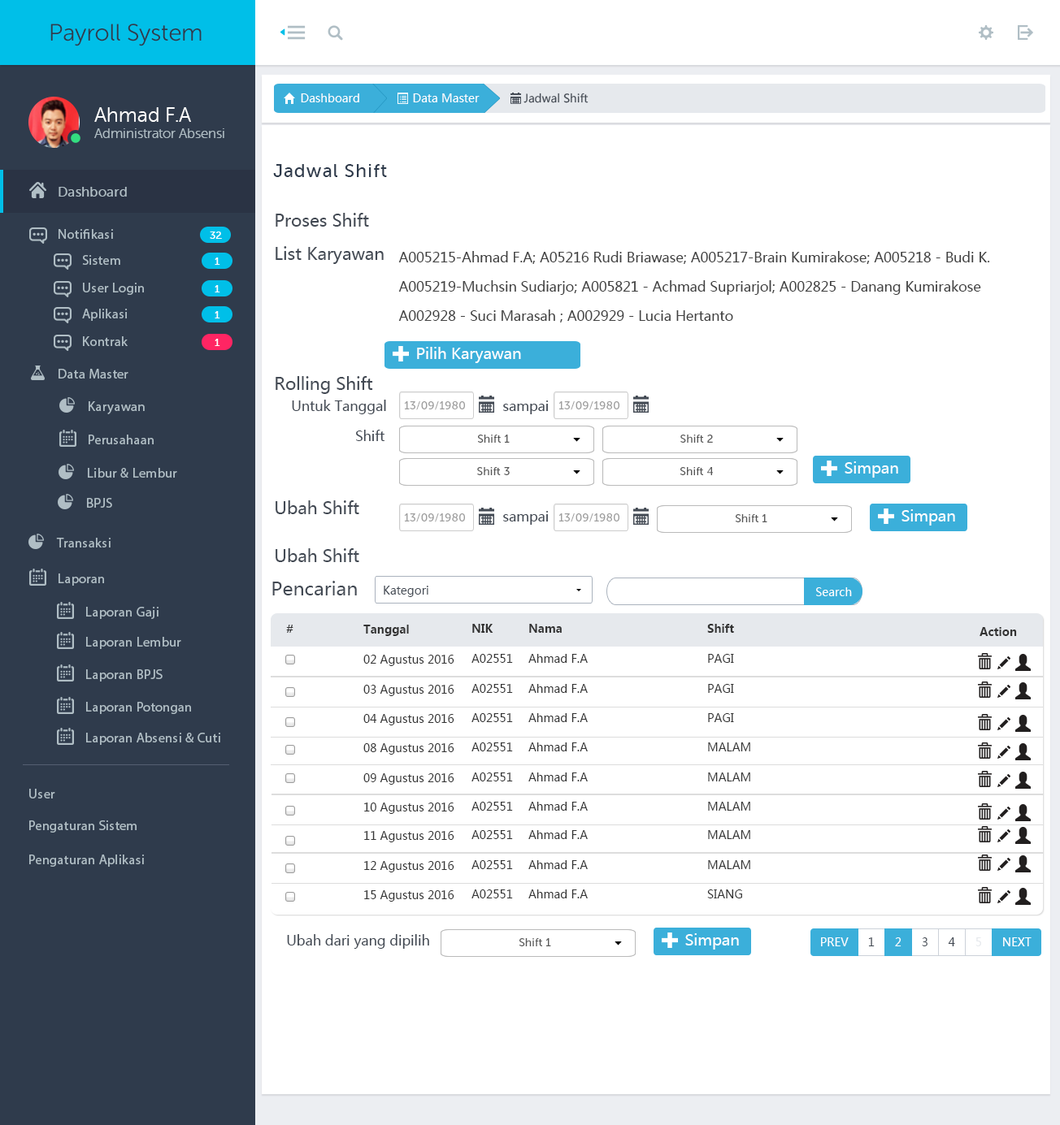
<style>
.page{position:relative;width:1060px;height:1125px;background:#ffffff}
.page>*{position:absolute;margin:0}
.t1{font:23.7px "MuseoSansRounded-300";color:#2f3b4c}
.t2{font:11.4px "MicrosoftYaHei";color:#ffffff}
.t3{font:11.2px "MicrosoftYaHei";color:#434a54}
.t4{font:13.5px "MuseoSansRounded-300";color:#b0bec5}
.t5{font:20.3px "MuseoSansRounded-300";color:#ffffff}
.t6{font:18.6px "MuseoSans-500";letter-spacing:0.04em;color:#2f3b4c}
.t7{font:13.5px "MuseoSans-500";letter-spacing:0.02em;color:#b0bec5}
.t8{font:16.9px "MicrosoftYaHei";color:#434a54}
.t9{font:13.5px "MyriadPro-Regular";letter-spacing:0.02em;color:#b0bec5}
.t10{font:10.2px "MuseoSans-500";letter-spacing:0.02em;color:#ffffff}
.t11{font:13.5px/29.3px "MicrosoftYaHei";color:#414141}
.t12{font:15.2px "MicrosoftYaHei";color:#ffffff}
.t13{font:13.5px "MicrosoftYaHei";color:#434a54}
.t14{font:11.4px "MuseoSans-500";color:#9e9e9e}
.t15{font:11.4px "MuseoSans-500";color:#585858}
.t16{font:18.6px "MicrosoftYaHei";color:#434a54}
.t17{font:11.4px "MicrosoftYaHei";color:#434a54}
.t18{font:11.4px "MicrosoftYaHei-Bold";color:#333333}
.t19{font:11.4px "MicrosoftYaHei";color:#333333}
.t20{font:11.4px "MicrosoftYaHei";color:#e6e9ed}
</style>
<div class="page">
<p class="t1" style="left:50px;top:24px;width:152px;height:22px">Payroll System</p>
<p class="t2" style="left:301px;top:93px;width:58px;height:9px">Dashboard</p>
<p class="t2" style="left:413px;top:93px;width:66px;height:9px">Data Master</p>
<p class="t3" style="left:523px;top:93px;width:65px;height:10px">Jadwal Shift</p>
<p class="t4" style="left:94px;top:107px;width:130px;height:31px"><span class="t5">Ahmad F.A <br></span>Administrator Absensi</p>
<p class="t6" style="left:273px;top:164px;width:114px;height:13px">Jadwal Shift</p>
<p class="t7" style="left:59px;top:187px;width:68px;height:10px">Dashboard</p>
<p class="t8" style="left:275px;top:213px;width:94px;height:14px">Proses Shift</p>
<p class="t9" style="left:59px;top:229px;width:54px;height:10px">Notifikasi</p>
<p class="t10" style="left:210px;top:232px;width:12px;height:7px">32</p>
<p class="t9" style="left:82px;top:255px;width:38px;height:10px">Sistem</p>
<p class="t10" style="left:215px;top:258px;width:5px;height:7px">1</p>
<p class="t8" style="left:275px;top:246px;width:109px;height:18px">List Karyawan</p>
<p class="t11" style="left:398px;top:251px;width:592px;height:72px">A005215-Ahmad F.A; A05216 Rudi Briawase; A005217-Brain Kumirakose; A005218 - Budi K.<br>A005219-Muchsin Sudiarjo; A005821 - Achmad Supriarjol; A002825 - Danang Kumirakose<br>A002928 - Suci Marasah ; A002929 - Lucia Hertanto</p>
<p class="t9" style="left:83px;top:283px;width:61px;height:12px">User Login</p>
<p class="t10" style="left:215px;top:285px;width:5px;height:8px">1</p>
<p class="t9" style="left:82px;top:309px;width:46px;height:12px">Aplikasi</p>
<p class="t10" style="left:215px;top:311px;width:5px;height:8px">1</p>
<p class="t9" style="left:83px;top:336px;width:45px;height:10px">Kontrak</p>
<p class="t10" style="left:215px;top:339px;width:5px;height:7px">1</p>
<p class="t12" style="left:417px;top:347px;width:104px;height:16px">Pilih Karyawan</p>
<p class="t9" style="left:59px;top:369px;width:69px;height:10px">Data Master</p>
<p class="t8" style="left:275px;top:376px;width:98px;height:18px">Rolling Shift</p>
<p class="t9" style="left:89px;top:401px;width:56px;height:13px">Karyawan</p>
<p class="t13" style="left:292px;top:400px;width:94px;height:14px">Untuk Tanggal</p>
<p class="t14" style="left:404px;top:401px;width:61px;height:9px">13/09/1980</p>
<p class="t13" style="left:503px;top:401px;width:45px;height:13px">sampai</p>
<p class="t14" style="left:558px;top:401px;width:61px;height:9px">13/09/1980</p>
<p class="t9" style="left:89px;top:435px;width:65px;height:9px">Perusahaan</p>
<p class="t13" style="left:356px;top:430px;width:28px;height:11px">Shift</p>
<p class="t15" style="left:478px;top:435px;width:31px;height:8px">Shift 1</p>
<p class="t15" style="left:680px;top:435px;width:33px;height:8px">Shift 2</p>
<p class="t12" style="left:844px;top:462px;width:54px;height:16px">Simpan</p>
<p class="t9" style="left:88px;top:468px;width:89px;height:10px">Libur &amp; Lembur</p>
<p class="t15" style="left:477px;top:467px;width:32px;height:8px">Shift 3</p>
<p class="t15" style="left:680px;top:467px;width:33px;height:8px">Shift 4</p>
<p class="t9" style="left:87px;top:498px;width:25px;height:10px">BPJS</p>
<p class="t8" style="left:275px;top:501px;width:84px;height:13px">Ubah Shift</p>
<p class="t12" style="left:901px;top:509px;width:54px;height:17px">Simpan</p>
<p class="t14" style="left:404px;top:513px;width:61px;height:9px">13/09/1980</p>
<p class="t13" style="left:503px;top:511px;width:45px;height:14px">sampai</p>
<p class="t14" style="left:558px;top:513px;width:61px;height:9px">13/09/1980</p>
<p class="t15" style="left:735px;top:514px;width:32px;height:8px">Shift 1</p>
<p class="t9" style="left:56px;top:538px;width:55px;height:10px">Transaksi</p>
<p class="t8" style="left:275px;top:548px;width:84px;height:14px">Ubah Shift</p>
<p class="t9" style="left:59px;top:574px;width:45px;height:12px">Laporan</p>
<p class="t16" style="left:272px;top:581px;width:85px;height:15px">Pencarian</p>
<p class="t17" style="left:384px;top:586px;width:44px;height:11px">Kategori</p>
<p class="t2" style="left:816px;top:587px;width:36px;height:9px">Search</p>
<p class="t9" style="left:86px;top:607px;width:72px;height:12px">Laporan Gaji</p>
<p class="t18" style="left:286px;top:625px;width:7px;height:8px">#</p>
<p class="t18" style="left:363px;top:625px;width:46px;height:11px">Tanggal</p>
<p class="t18" style="left:472px;top:624px;width:21px;height:9px">NIK</p>
<p class="t18" style="left:529px;top:624px;width:32px;height:9px">Nama</p>
<p class="t18" style="left:707px;top:624px;width:27px;height:9px">Shift</p>
<p class="t18" style="left:979px;top:627px;width:38px;height:9px">Action</p>
<p class="t9" style="left:86px;top:637px;width:95px;height:12px">Laporan Lembur</p>
<p class="t19" style="left:363px;top:655px;width:91px;height:11px">02 Agustus 2016</p>
<p class="t19" style="left:471px;top:654px;width:42px;height:9px">A02551</p>
<p class="t19" style="left:528px;top:654px;width:59px;height:9px">Ahmad F.A</p>
<p class="t19" style="left:708px;top:654px;width:26px;height:9px">PAGI</p>
<p class="t9" style="left:86px;top:670px;width:77px;height:12px">Laporan BPJS</p>
<p class="t19" style="left:363px;top:685px;width:91px;height:11px">03 Agustus 2016</p>
<p class="t19" style="left:471px;top:684px;width:42px;height:9px">A02551</p>
<p class="t19" style="left:528px;top:684px;width:59px;height:9px">Ahmad F.A</p>
<p class="t19" style="left:708px;top:684px;width:26px;height:9px">PAGI</p>
<p class="t9" style="left:86px;top:702px;width:105px;height:12px">Laporan Potongan</p>
<p class="t19" style="left:471px;top:713px;width:42px;height:9px">A02551</p>
<p class="t19" style="left:528px;top:713px;width:59px;height:9px">Ahmad F.A</p>
<p class="t19" style="left:708px;top:713px;width:26px;height:9px">PAGI</p>
<p class="t19" style="left:363px;top:714px;width:91px;height:12px">04 Agustus 2016</p>
<p class="t9" style="left:86px;top:733px;width:134px;height:12px">Laporan Absensi &amp; Cuti</p>
<p class="t19" style="left:363px;top:743px;width:91px;height:12px">08 Agustus 2016</p>
<p class="t19" style="left:471px;top:743px;width:42px;height:9px">A02551</p>
<p class="t19" style="left:528px;top:743px;width:59px;height:9px">Ahmad F.A</p>
<p class="t19" style="left:708px;top:743px;width:42px;height:9px">MALAM</p>
<p class="t19" style="left:363px;top:774px;width:91px;height:11px">09 Agustus 2016</p>
<p class="t19" style="left:471px;top:773px;width:42px;height:9px">A02551</p>
<p class="t19" style="left:528px;top:773px;width:59px;height:9px">Ahmad F.A</p>
<p class="t19" style="left:708px;top:773px;width:42px;height:9px">MALAM</p>
<p class="t9" style="left:29px;top:789px;width:26px;height:10px">User</p>
<p class="t19" style="left:364px;top:803px;width:90px;height:11px">10 Agustus 2016</p>
<p class="t19" style="left:471px;top:802px;width:42px;height:9px">A02551</p>
<p class="t19" style="left:528px;top:802px;width:59px;height:9px">Ahmad F.A</p>
<p class="t19" style="left:708px;top:802px;width:42px;height:9px">MALAM</p>
<p class="t9" style="left:29px;top:821px;width:108px;height:12px">Pengaturan Sistem</p>
<p class="t19" style="left:364px;top:831px;width:90px;height:12px">11 Agustus 2016</p>
<p class="t19" style="left:471px;top:830px;width:42px;height:9px">A02551</p>
<p class="t19" style="left:528px;top:830px;width:59px;height:9px">Ahmad F.A</p>
<p class="t19" style="left:708px;top:830px;width:42px;height:9px">MALAM</p>
<p class="t9" style="left:29px;top:855px;width:115px;height:12px">Pengaturan Aplikasi</p>
<p class="t19" style="left:364px;top:861px;width:90px;height:12px">12 Agustus 2016</p>
<p class="t19" style="left:471px;top:860px;width:42px;height:9px">A02551</p>
<p class="t19" style="left:528px;top:860px;width:59px;height:9px">Ahmad F.A</p>
<p class="t19" style="left:708px;top:860px;width:42px;height:9px">MALAM</p>
<p class="t19" style="left:364px;top:891px;width:90px;height:11px">15 Agustus 2016</p>
<p class="t19" style="left:471px;top:890px;width:42px;height:9px">A02551</p>
<p class="t19" style="left:528px;top:890px;width:59px;height:9px">Ahmad F.A</p>
<p class="t19" style="left:707px;top:890px;width:35px;height:9px">SIANG</p>
<p class="t13" style="left:287px;top:934px;width:142px;height:15px">Ubah dari yang dipilih</p>
<p class="t15" style="left:519px;top:939px;width:32px;height:8px">Shift 1</p>
<p class="t12" style="left:685px;top:934px;width:54px;height:16px">Simpan</p>
<p class="t2" style="left:821px;top:938px;width:27px;height:9px">PREV</p>
<p class="t17" style="left:868px;top:938px;width:6px;height:9px">1</p>
<p class="t2" style="left:895px;top:938px;width:6px;height:9px">2</p>
<p class="t17" style="left:921px;top:938px;width:6px;height:9px">3</p>
<p class="t17" style="left:947px;top:938px;width:8px;height:9px">4</p>
<p class="t20" style="left:975px;top:938px;width:6px;height:9px">5</p>
<p class="t2" style="left:1003px;top:938px;width:28px;height:9px">NEXT</p>
</div>
